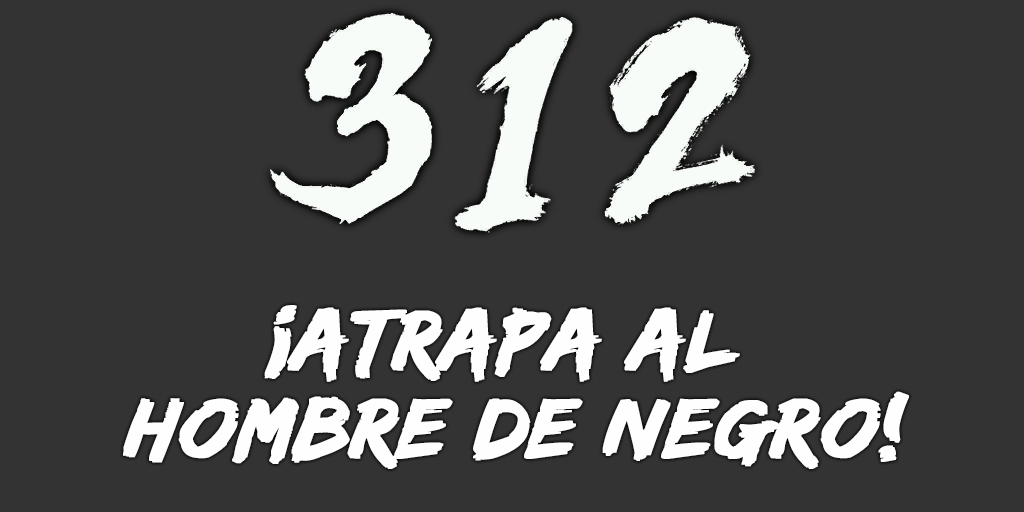
<style>
.page{position:relative;width:1024px;height:512px;background:#333333}
.page>*{position:absolute;margin:0}
.t1{font:88px/88px "EdoSZ";color:#fefefe;font-weight:bold;font-style:italic;scale:1.04 1}
</style>
<div class="page">
<p class="t1" style="left:123px;top:305px;width:786px;height:164px;text-align:center">¡atrapa al <br>hombre de negro!</p>
</div>
